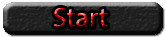
<style>
.page{position:relative;width:166px;height:37px}
.page>*{position:absolute;margin:0}
.t1{font:28px "MyriadPro-Regular"}
</style>
<div class="page">
<p class="t1" style="left:54px;top:8px;width:54px;height:19px">Start</p>
</div>
